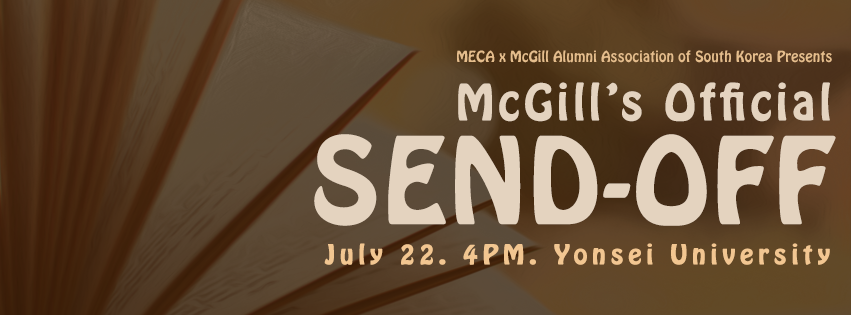
<style>
.page{position:relative;width:851px;height:315px}
.page>*{position:absolute;margin:0}
.t1{font:13.5px "HoboStd";letter-spacing:0.012em;color:#e5bd8c}
.t2{font:43.9px "HoboStd";letter-spacing:0.07em;color:#e4d3bf;font-weight:bold}
.t3{font:105.5px "HoboStd";letter-spacing:0.01em;color:#e4d3bf;font-weight:bold}
.t4{font:24.2px "HoboStd";letter-spacing:0.19em;color:#f2c691;font-weight:bold}
</style>
<div class="page">
<p class="t1" style="left:457px;top:50px;width:375px;height:13px">MECA x McGill Alumni Association of South Korea Presents</p>
<p class="t2" style="left:458px;top:82px;width:372px;height:40px">McGill’s Official</p>
<p class="t3" style="left:314px;top:134px;width:522px;height:92px">SEND-OFF</p>
<p class="t4" style="left:324px;top:243px;width:506px;height:22px">July 22. 4PM. Yonsei University</p>
</div>
